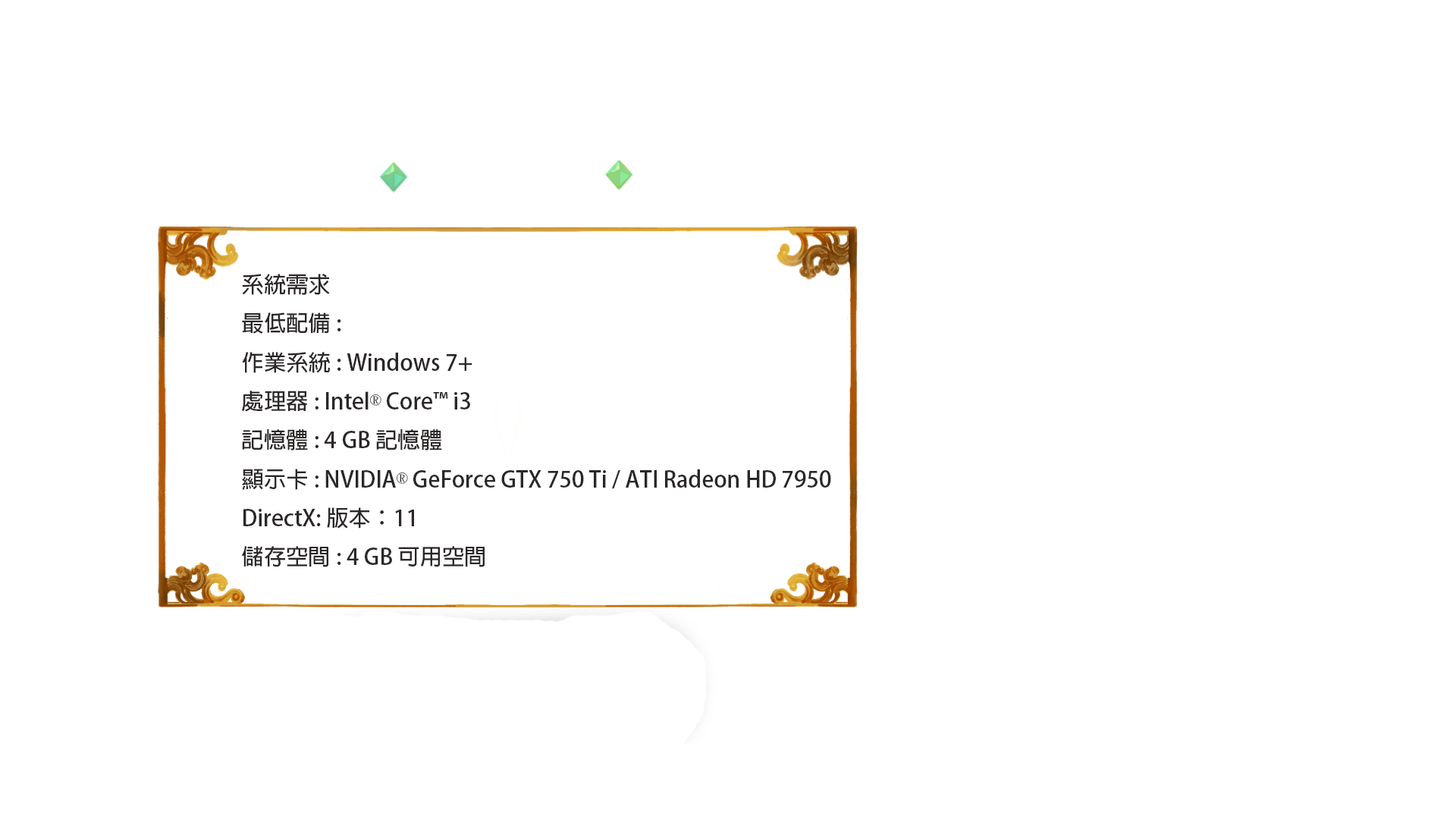
<style>
.page{position:relative;width:1456px;height:819px;background:#ffffff}
.page>*{position:absolute;margin:0}
.t1{font:22.2px "AdobeFanHeitiStd-Bold";color:#2b2727}
.t2{font:22.2px "DFKaiShu-SB-Estd-BF";color:#2b2727}
</style>
<div class="page">
<p class="t1" style="left:241px;top:273px;width:590px;height:294px">系統需求<br>最低配備:<br>作業系統: Windows 7+<br>處理器: Intel<span class="t2">®</span> Core™ i3<br>記憶體: 4 GB 記憶體<br>顯示卡: NVIDIA<span class="t2">®</span> GeForce GTX 750 Ti / ATI Radeon HD 7950<br>DirectX: 版本：11<br>儲存空間: 4 GB 可用空間</p>
</div>
